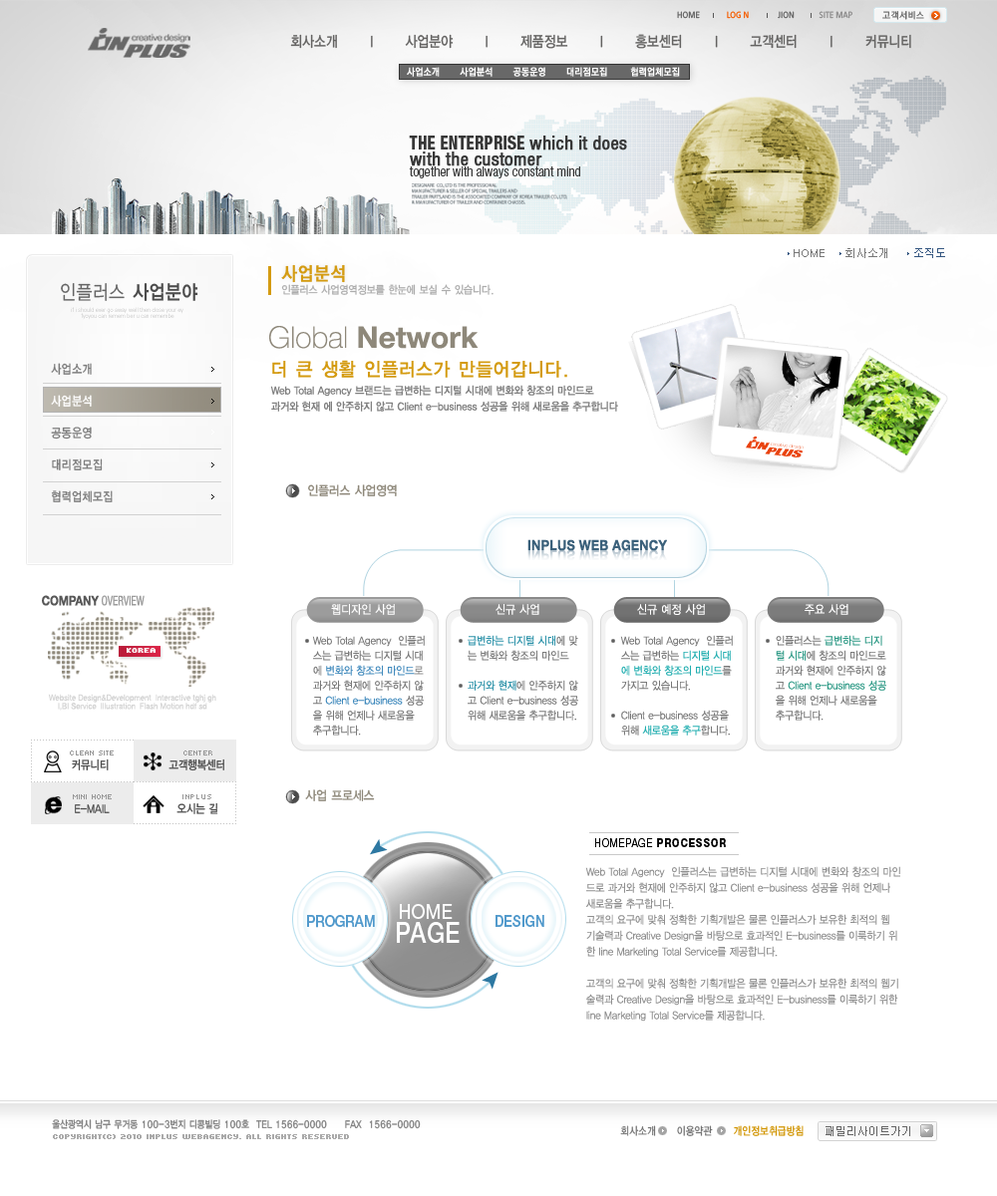
<style>
.page{position:relative;width:997px;height:1196px;background:#ffffff}
.page>*{position:absolute;margin:0}
.t1{font:9px "Moebius";color:#8d8c8c;text-transform:uppercase;scale:0.9 1}
.t2{font:9px "Moebius";color:#636363;text-transform:uppercase;scale:0.9 1}
.t3{font:9px "Moebius";color:#f55d00;text-transform:uppercase;scale:0.9 1}
.t4{font:9px "YGO530";letter-spacing:0.04em;color:#656565}
.t5{font:15px "YGO33";letter-spacing:-0.075em;color:#646362;scale:0.85 1}
.t6{font:10px "YGO540";letter-spacing:0.02em;color:#ffffff;scale:0.9 1}
.t7{font:18.5px/16.4px "HelveticaNeue-Condensed";color:#373737;font-weight:bold}
.t8{font:18.5px/16.4px "HelveticaNeue-HeavyCond";color:#373737;text-transform:uppercase;scale:0.9 1}
.t9{font:13.7px "HelveticaNeue-LightCond";color:#373737}
.t10{font:11px "Dotum";color:#777777}
.t11{font:11px "Dotum";color:#345680}
.t12{font:18.8px "YGO33";letter-spacing:-0.025em;color:#d49b11;font-weight:bold;scale:0.86 1}
.t13{font:19.9px "YGO32";letter-spacing:-0.045em;color:#656565;text-transform:uppercase;scale:0.86 1}
.t14{font:19.9px "YGO34";letter-spacing:-0.045em;color:#4c4c4c;text-transform:uppercase;scale:0.86 1}
.t15{font:11px "YGO33";letter-spacing:-0.09em;color:#adadad;scale:0.9 1}
.t16{font:6px/6px "Univers-Light";scale:0.9 1}
.t17{font:29.9px "HelveticaNeue-Bold";color:#8e887a}
.t18{font:29.9px "HelveticaNeue-Thin";color:#8e887a}
.t19{font:12.6px/31.9px "YGO33";letter-spacing:-0.04em;color:#7c7c7c;scale:0.86 1}
.t20{font:12.6px/31.9px "YGO33";letter-spacing:-0.04em;color:#ffffff;scale:0.86 1}
.t21{font:18.8px "YGO33";letter-spacing:-0.04em;color:#d49b11;scale:0.95 1}
.t22{font:11px/15.9px "YDIYGO330";color:#808080;scale:0.9 1}
.t23{font:13px "YGO33";letter-spacing:-0.09em;color:#8e887a;scale:0.9 1}
.t24{font:14px "HelveticaNeue-Bold";letter-spacing:0.02em;color:#3b617b;scale:0.9 1}
.t25{font:13.1px "HelveticaNeue-Condensed";color:#9c9c9c;scale:0.85 1}
.t26{font:13.1px "HelveticaNeue-Bold";color:#585858;scale:0.85 1}
.t27{font:12px "YDIYGO320";letter-spacing:0.02em;color:#ffffff;scale:0.9 1}
.t28{font:11px/15px "YDIYGO320";color:#797979;scale:0.9 1}
.t29{font:11px/15px "YDIYGO320";color:#3f89bc;scale:0.9 1}
.t30{font:11px/15px "YDIYGO320";color:#8f8f8f;scale:0.9 1}
.t31{font:11px/15px "YDIYGO320";color:#2c92a9;scale:0.9 1}
.t32{font:11px/15px "YDIYGO320";color:#22aeb0;scale:0.9 1}
.t33{font:11px/15px "YDIYGO320";color:#2a9884;scale:0.9 1}
.t34{font:8.1px "Kroeger0555";color:#ffffff;font-weight:bold}
.t35{font:8.4px/8.4px "HelveticaNeue-Roman";color:#d4d4d4;scale:0.9 1}
.t36{font:8px "Kroeger0556";letter-spacing:-0.1em;color:#989898}
.t37{font:12px "YDIYGO330";color:#4c4c4c;scale:0.85 1}
.t38{font:8px "Kroeger0556";letter-spacing:-0.1em;color:#989898;text-transform:uppercase}
.t39{font:8px "Kroeger0556";letter-spacing:-0.04em;color:#989898}
.t40{font:12px "YDIYGO330";color:#4c4c4c;text-transform:uppercase;scale:0.85 1}
.t41{font:11.5px "HelveticaNeue-Heavy";letter-spacing:0.07em;color:#000000;text-transform:uppercase;scale:0.86 1}
.t42{font:11.5px "HelveticaNeue-Light";letter-spacing:0.07em;color:#000000;text-transform:uppercase;scale:0.86 1}
.t43{font:11px/15.9px "YDIYGO320";color:#8f8f8f;scale:0.9 1}
.t44{font:20.9px/23.9px "HelveticaNeue-Roman";color:#ffffff;scale:0.86 1}
.t45{font:28.3px/23.9px "HelveticaNeue-Medium";letter-spacing:0.02em;color:#ffffff;scale:0.86 1}
.t46{font:15.7px "HelveticaNeue-Medium";color:#529acc;text-transform:uppercase;scale:0.86 1}
.t47{font:15.7px "HelveticaNeue-Medium";color:#529acc;scale:0.86 1}
.t48{font:10px "YGO33";letter-spacing:-0.075em;color:#828282;scale:0.85 1}
.t49{font:11px "YGO33";letter-spacing:-0.05em;color:#757575;scale:0.85 1}
.t50{font:11px "YGO33";letter-spacing:-0.05em;color:#d19400;scale:0.85 1}
.t51{font:11px "Dotum";color:#656565}
.t52{font:8px "Kroeger0555";color:#aaaaaa;font-weight:bold}
</style>
<div class="page">
<p class="t1" style="left:677px;top:11px;width:175px;height:8px"><span class="t2">Home             </span><span class="t3">Log n              </span><span class="t2">Jion</span>            Site map</p>
<p class="t4" style="left:882px;top:11px;width:42px;height:9px">고객서비스</p>
<p class="t5" style="left:290px;top:34px;width:621px;height:15px">회사소개      l      사업분야      l      제품정보      l      홍보센터      l      고객센터      l      커뮤니티</p>
<p class="t6" style="left:407px;top:67px;width:273px;height:10px">사업소개       사업분석       공동운영       대리점모집        협력업체모집</p>
<p class="t7" style="left:409px;top:136px;width:218px;height:30px"><span class="t8"><br>The enterprise </span>which it does<br>with the customer</p>
<p class="t9" style="left:409px;top:166px;width:171px;height:12px">together with always constant mind</p>
<p class="t10" style="left:793px;top:248px;width:152px;height:10px">HOME     회사소개      <span class="t11">조직도</span></p>
<p class="t12" style="left:281px;top:264px;width:64px;height:19px">사업분석</p>
<p class="t13" style="left:61px;top:283px;width:137px;height:18px">인플러스 <span class="t14">사업분야</span></p>
<p class="t15" style="left:281px;top:284px;width:212px;height:11px">인플러스 사업영역정보를 한눈에 보실 수 있습니다.</p>
<p class="t16" style="left:71px;top:307px;width:112px;height:13px;text-align:center">if i should ever go away well then close your ey<br>fyoyou can remem ber u can remembe</p>
<p class="t17" style="left:269px;top:326px;width:209px;height:23px"><span class="t18">Global </span>Network</p>
<p class="t19" style="left:51px;top:363px;width:62px;height:139px">사업소개<br><span class="t20">사업분석<br></span>공동운영<br>대리점모집<br>협력업체모집</p>
<p class="t21" style="left:272px;top:360px;width:295px;height:18px">더 큰 생활 인플러스가 만들어갑니다.</p>
<p class="t22" style="left:270px;top:385px;width:348px;height:27px">Web Total Agency 브랜드는 급변하는 디지털 시대에 변화와 창조의 마인드로 <br>과거와 현재 에 안주하지 않고 Client e-business 성공을 위해 새로움을 추구합니다</p>
<p class="t23" style="left:308px;top:484px;width:89px;height:13px">인플러스 사업영역</p>
<p class="t24" style="left:527px;top:539px;width:140px;height:12px">INPLUS WEB AGENCY</p>
<p class="t25" style="left:42px;top:595px;width:103px;height:11px"><span class="t26">COMPANY</span> OVERVIEW</p>
<p class="t27" style="left:331px;top:604px;width:64px;height:11px">웹디자인 사업</p>
<p class="t27" style="left:495px;top:604px;width:44px;height:11px">신규 사업</p>
<p class="t27" style="left:637px;top:604px;width:68px;height:11px">신규 예정 사업</p>
<p class="t27" style="left:804px;top:604px;width:44px;height:11px">주요 사업</p>
<p class="t28" style="left:312px;top:635px;width:113px;height:101px">Web Total Agency  인플러<br>스는 급변하는 디지털 시대<br>에 <span class="t29">변화와 창조의 마인드</span><span class="t30">로</span> <br>과거와 현재에 안주하지 않<br>고 <span class="t29">Client e-business</span> 성공<br>을 위해 언제나 새로움을 <br>추구합니다.</p>
<p class="t28" style="left:468px;top:635px;width:110px;height:86px"><span class="t31">급변하는 디지털 시대</span>에 맞<br>는 변화와 창조의 마인드<br> <br><span class="t31">과거와 현재</span>에 안주하지 않<br>고 Client e-business 성공<br>위해 새로움을 추구합니다.</p>
<p class="t28" style="left:620px;top:635px;width:113px;height:101px">Web Total Agency  인플러<br>스는 급변하는 <span class="t32">디지털 시대<br>에 변화와 창조의 마인드</span>를 <br>가지고 있습니다. <br><br>Client e-business 성공을 <br>위해 <span class="t32">새로움을 추구</span>합니다.</p>
<p class="t28" style="left:776px;top:635px;width:110px;height:86px">인플러스는 <span class="t33">급변하는 디지<br>털 시대</span>에 창조의 마인드로 <br>과거와 현재에 안주하지 않<br>고 <span class="t33">Client e-business 성공<br></span>을 위해 언제나 새로움을 <br>추구합니다.</p>
<p class="t34" style="left:127px;top:648px;width:29px;height:5px">korea</p>
<p class="t35" style="left:48px;top:694px;width:168px;height:17px;text-align:center">Website Design&amp;Development  Interactive tghj gh<br>I,BI Service  Illustration  Flash Motion hdf sd</p>
<p class="t36" style="left:70px;top:751px;width:44px;height:5px">CLEAN SITE</p>
<p class="t37" style="left:72px;top:759px;width:37px;height:12px">커뮤니티</p>
<p class="t37" style="left:168px;top:759px;width:56px;height:13px">고객행복센터</p>
<p class="t38" style="left:183px;top:751px;width:29px;height:5px">center</p>
<p class="t36" style="left:73px;top:794px;width:39px;height:5px">MINI HOME</p>
<p class="t39" style="left:182px;top:794px;width:29px;height:5px">INPLUS</p>
<p class="t23" style="left:305px;top:789px;width:70px;height:12px">사업 프로세스</p>
<p class="t40" style="left:75px;top:804px;width:35px;height:9px">E-mail</p>
<p class="t37" style="left:176px;top:802px;width:42px;height:12px">오시는 길</p>
<p class="t41" style="left:595px;top:838px;width:131px;height:9px"><span class="t42">homepage</span> processor</p>
<p class="t43" style="left:585px;top:866px;width:315px;height:156px">Web Total Agency  인플러스는 급변하는 디지털 시대에 변화와 창조의 마인<br>드로 과거와 현재에 안주하지 않고 Client e-business 성공을 위해 언제나 <br>새로움을 추구합니다.<br>고객의 요구에 맞춰 정확한 기획개발은 물론 인플러스가 보유한 최적의 웹<br>기술력과 Creative Design을 바탕으로 효과적인 E-business를 이룩하기 위<br>한 line Marketing Total Service를 제공합니다. <br><br>고객의 요구에 맞춰 정확한 기획개발은 물론 인플러스가 보유한 최적의 웹기<br>술력과 Creative Design을 바탕으로 효과적인 E-business를 이룩하기 위한<br>line Marketing Total Service를 제공합니다.</p>
<p class="t44" style="left:397px;top:904px;width:63px;height:39px;text-align:center">HOME <br><span class="t45">PAGE</span></p>
<p class="t46" style="left:307px;top:915px;width:68px;height:13px">program</p>
<p class="t47" style="left:495px;top:915px;width:49px;height:12px">DESIGN</p>
<p class="t48" style="left:52px;top:1119px;width:369px;height:10px">울산광역시 남구 무거동 100-3번지 디콩빌딩 100호  TEL 1566-0000     FAX  1566-0000</p>
<p class="t49" style="left:620px;top:1125px;width:183px;height:11px">회사소개     이용약관    <span class="t50"> 개인정보취급방침</span></p>
<p class="t51" style="left:825px;top:1126px;width:85px;height:10px">패밀리사이트가기</p>
<p class="t52" style="left:53px;top:1134px;width:296px;height:5px">COPYRIGHT(C) 2010 INPLUS WEBAGENCY. ALL RIGHTS RESERVED</p>
</div>
